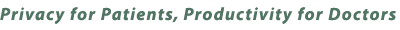
<style>
.page{position:relative;width:400px;height:30px;background:#ffffff}
.page>*{position:absolute;margin:0}
.t1{font:17.7px "Myriad-BoldItalic";letter-spacing:0.075em;color:#527463}
</style>
<div class="page">
<p class="t1" style="left:0px;top:5px;width:397px;height:19px">Privacy for Patients, Productivity for Doctors</p>
</div>
